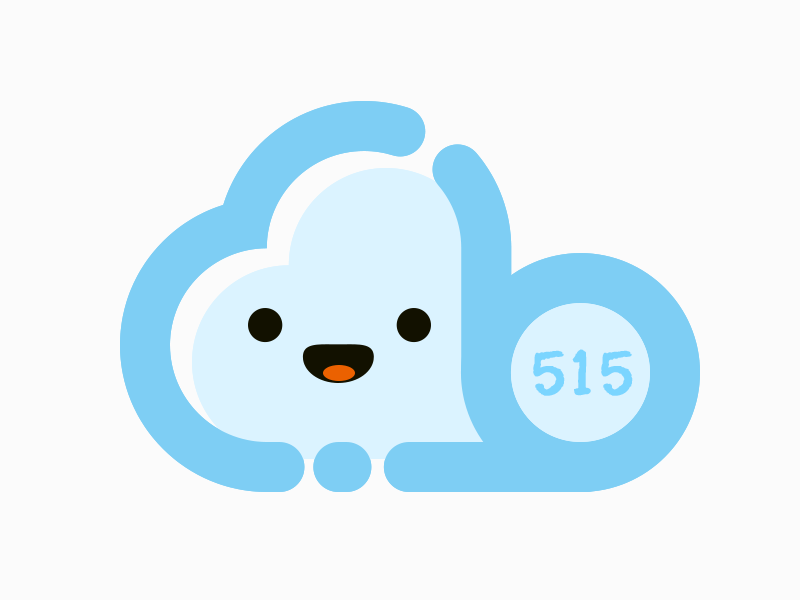
<style>
.page{position:relative;width:800px;height:600px;background:#fbfbfb}
.page>*{position:absolute;margin:0}
.t1{font:59px "AxureHandwriting";color:#7bd5ff;font-weight:bold}
</style>
<div class="page">
<p class="t1" style="left:533px;top:349px;width:100px;height:47px">515</p>
</div>
